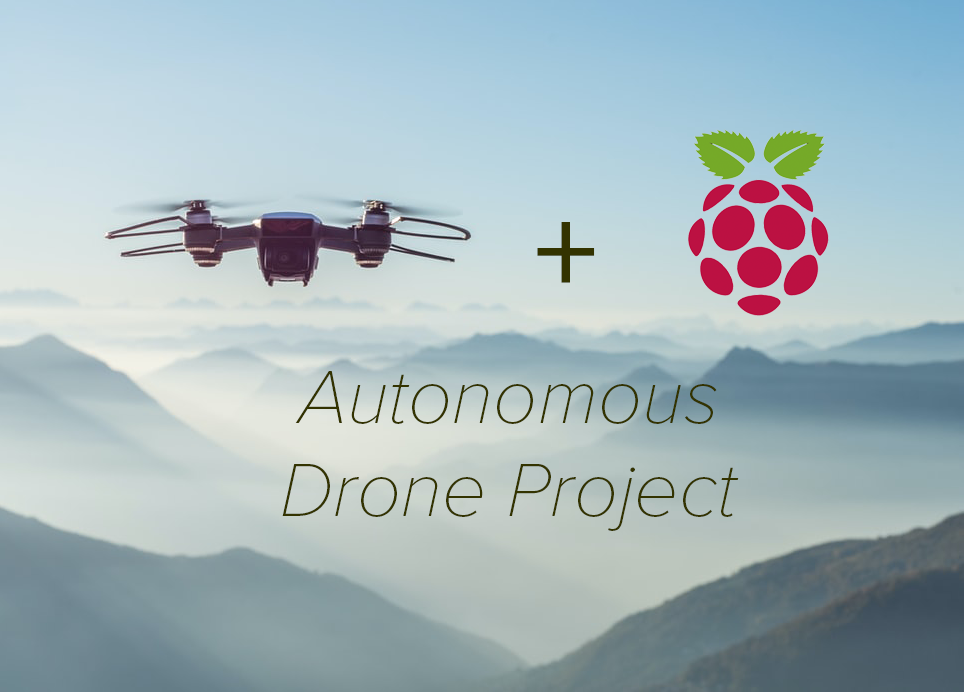
<style>
.page{position:relative;width:964px;height:692px}
.page>*{position:absolute;margin:0}
.t1{font:128px "ProximaNova-Medium";color:#333300}
.t2{font:78px "ProximaNova-ThinIt";color:#333300}
</style>
<div class="page">
<p class="t1" style="left:537px;top:222px;width:58px;height:61px">+</p>
<p class="t2" style="left:282px;top:371px;width:457px;height:160px;text-align:center">Autonomous<br>Drone Project</p>
</div>
